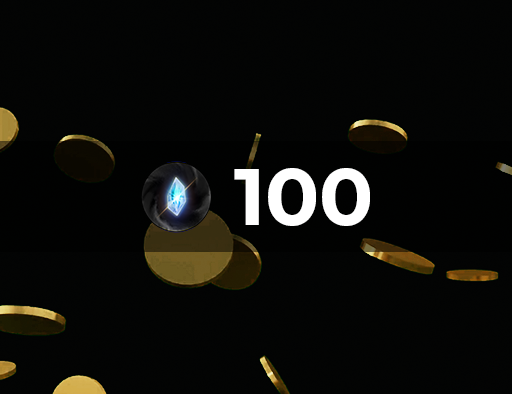
<style>
.page{position:relative;width:512px;height:394px;background:#030403}
.page>*{position:absolute;margin:0}
.t1{font:80px "Montserrat-Bold";color:#ffffff}
</style>
<div class="page">
<p class="t1" style="left:234px;top:168px;width:136px;height:58px">100</p>
</div>
